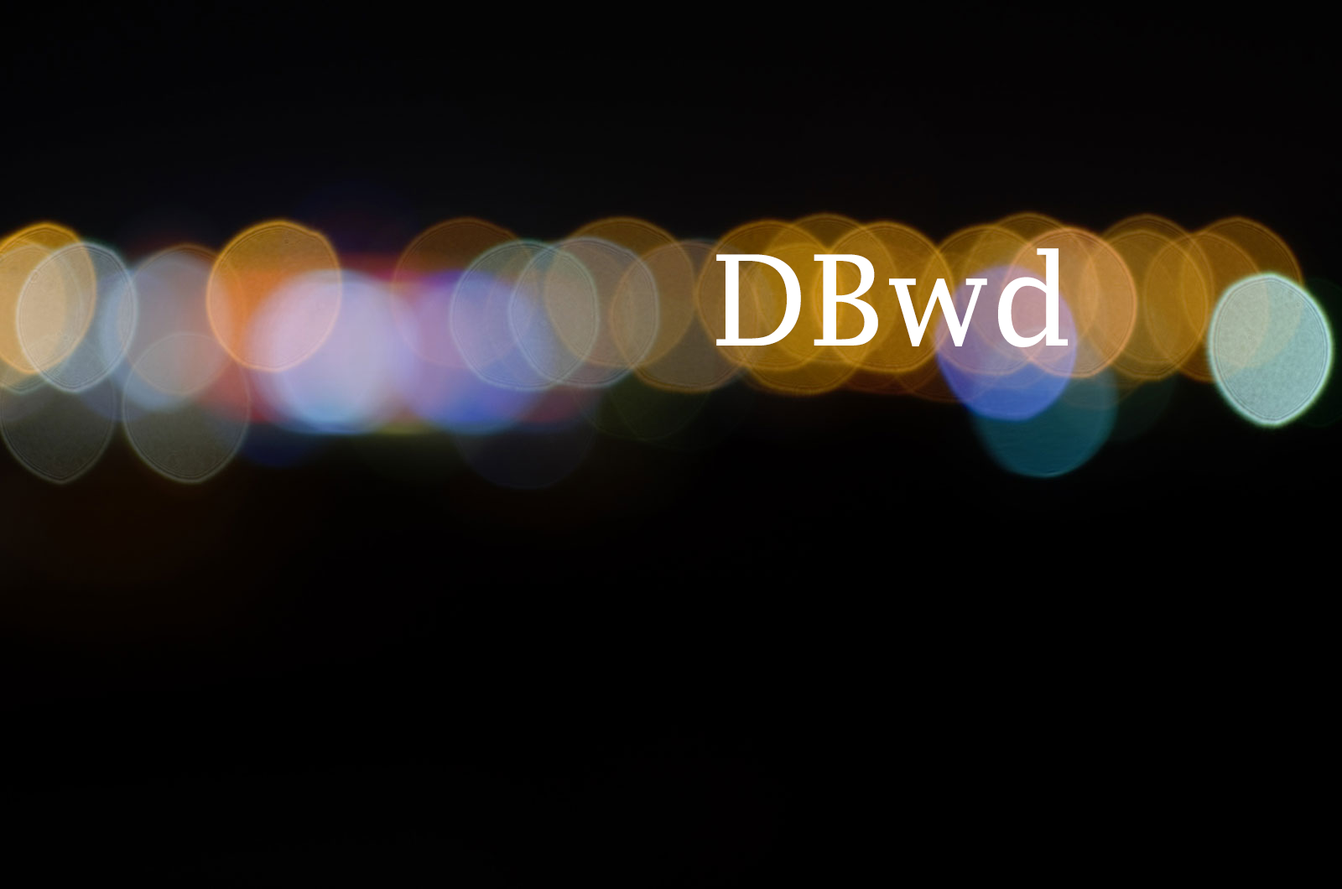
<style>
.page{position:relative;width:1342px;height:889px;background:#000000}
.page>*{position:absolute;margin:0}
.t1{font:125.8px "LucidaFax";color:#ffffff}
</style>
<div class="page">
<p class="t1" style="left:716px;top:248px;width:351px;height:99px">DBwd</p>
</div>
